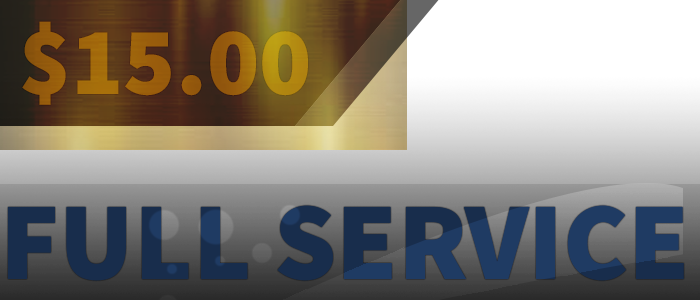
<style>
.page{position:relative;width:700px;height:300px}
.page>*{position:absolute;margin:0}
.t1{font:97px "SourceSansRoman-Black";color:#9d630c}
.t2{font:110.8px "SourceSansRoman-Black"}
</style>
<div class="page">
<p class="t1" style="left:22px;top:21px;width:286px;height:84px">$15.00</p>
<p class="t2" style="left:7px;top:205px;width:677px;height:76px">FULL SERVICE</p>
</div>
